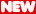
<style>
.page{position:relative;width:36px;height:14px;background:#fdf5f5}
.page>*{position:absolute;margin:0}
.t1{font:15px "Debussy";color:#fdf5f5}
</style>
<div class="page">
<p class="t1" style="left:1px;top:0px;width:35px;height:13px">NEW</p>
</div>
